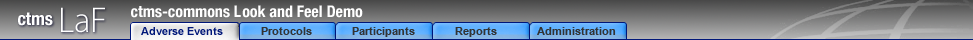
<style>
.page{position:relative;width:973px;height:40px}
.page>*{position:absolute;margin:0}
.t1{font:16px "HelveticaNeue-CondensedBold";color:#ffffff}
.t2{font:18px "HelveticaNeue-CondensedBold";color:#ffffff}
.t3{font:36px "MyriadPro-Light";color:#ffffff}
.t4{font:11px "Arial-BoldMT";color:#001779}
.t5{font:11px "Arial-BoldMT";color:#333333}
</style>
<div class="page">
<p class="t1" style="left:131px;top:5px;width:232px;height:13px">ctms-commons Look and Feel Demo</p>
<p class="t2" style="left:18px;top:12px;width:35px;height:14px">ctms</p>
<p class="t3" style="left:61px;top:7px;width:44px;height:26px">LaF</p>
<p class="t4" style="left:141px;top:27px;width:82px;height:8px">Adverse Events</p>
<p class="t5" style="left:261px;top:27px;width:51px;height:8px">Protocols</p>
<p class="t5" style="left:352px;top:27px;width:63px;height:10px">Participants</p>
<p class="t5" style="left:455px;top:27px;width:42px;height:10px">Reports</p>
<p class="t5" style="left:537px;top:27px;width:79px;height:8px">Administration</p>
</div>
